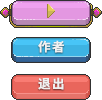
<style>
.page{position:relative;width:102px;height:100px;background:#ffffff}
.page>*{position:absolute;margin:0}
.t1{font:12.5px "SourceHanSansCN-Bold";letter-spacing:0.12em;color:#f1f1f1}
</style>
<div class="page">
<p class="t1" style="left:38px;top:40px;width:26px;height:13px">作者</p>
<p class="t1" style="left:38px;top:77px;width:26px;height:13px">退出</p>
</div>
